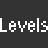
<style>
.page{position:relative;width:48px;height:48px;background:#333333}
.page>*{position:absolute;margin:0}
.t1{font:24px "OrangeKid-Regular";color:#ffffff}
</style>
<div class="page">
<p class="t1" style="left:0px;top:18px;width:48px;height:14px">Levels</p>
</div>
